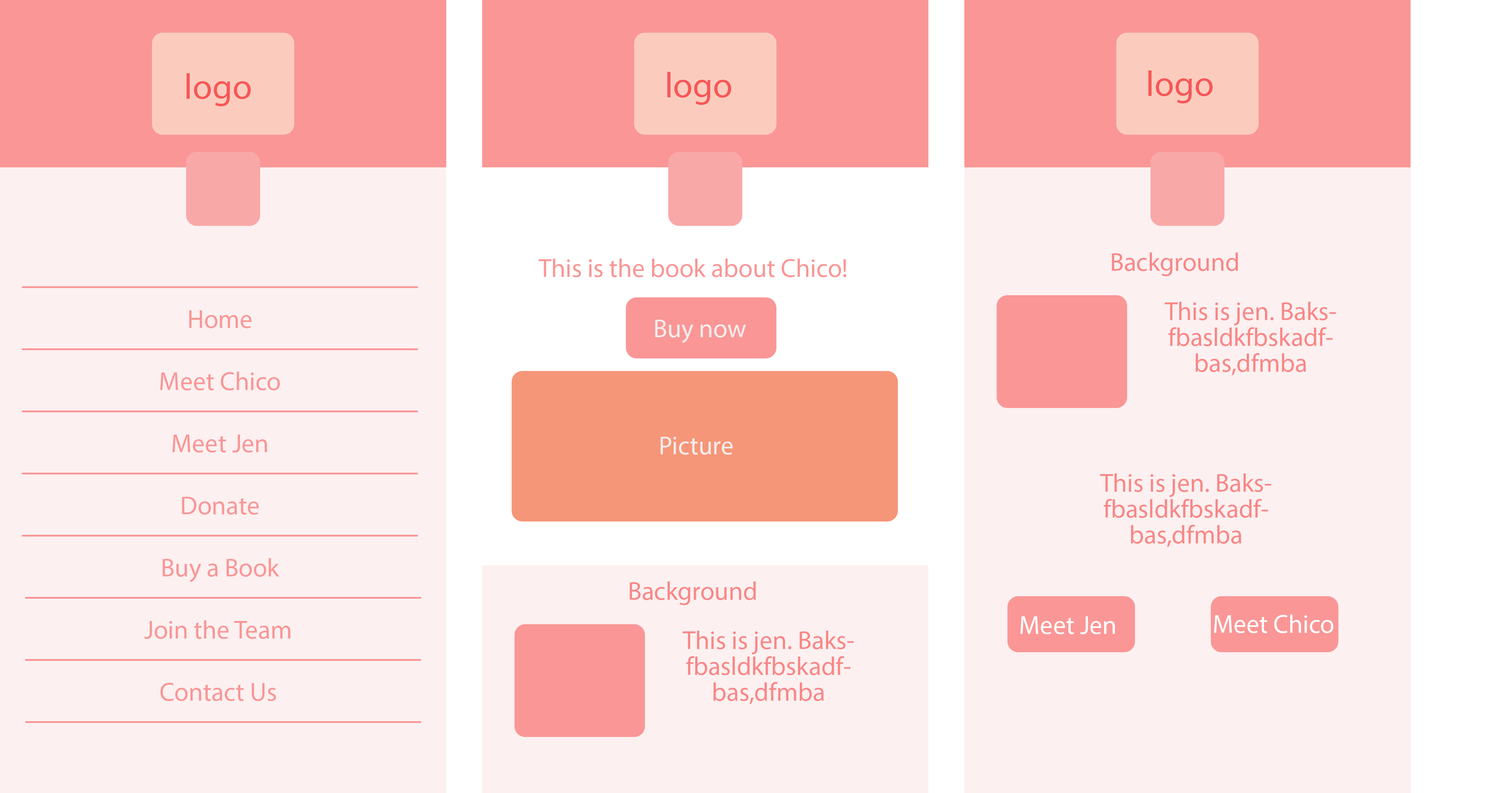
<style>
.page{position:relative;width:1504px;height:793px;background:#fcf0f0}
.page>*{position:absolute;margin:0}
.t1{font:35.9px "MyriadPro-Regular";color:#f85656}
.t2{font:25.9px "MyriadPro-Regular";color:#f98787}
.t3{font:25.9px "MyriadPro-Regular";color:#fa9696}
.t4{font:25.9px/25.9px "MyriadPro-Regular";color:#f98787}
.t5{font:25.9px "MyriadPro-Regular";color:#f3eded}
.t6{font:25.9px "MyriadPro-Regular";color:#ffffff}
</style>
<div class="page">
<p class="t1" style="left:186px;top:73px;width:65px;height:33px">logo</p>
<p class="t1" style="left:667px;top:72px;width:64px;height:33px">logo</p>
<p class="t1" style="left:1148px;top:70px;width:64px;height:33px">logo</p>
<p class="t2" style="left:1111px;top:253px;width:127px;height:23px">Background</p>
<p class="t3" style="left:538px;top:259px;width:308px;height:18px">This is the book about Chico!</p>
<p class="t4" style="left:1164px;top:302px;width:171px;height:73px;text-align:center">This is jen. Baksfbasldkfbskadfbas,dfmba</p>
<p class="t3" style="left:189px;top:310px;width:62px;height:18px">Home</p>
<p class="t5" style="left:655px;top:320px;width:91px;height:23px">Buy now</p>
<p class="t3" style="left:160px;top:372px;width:120px;height:18px">Meet Chico</p>
<p class="t3" style="left:172px;top:435px;width:95px;height:18px">Meet Jen</p>
<p class="t5" style="left:660px;top:437px;width:72px;height:18px">Picture</p>
<p class="t4" style="left:1100px;top:473px;width:171px;height:74px;text-align:center">This is jen. Baksfbasldkfbskadfbas,dfmba</p>
<p class="t3" style="left:182px;top:497px;width:77px;height:18px">Donate</p>
<p class="t3" style="left:162px;top:558px;width:117px;height:24px">Buy a Book</p>
<p class="t2" style="left:629px;top:582px;width:127px;height:23px">Background</p>
<p class="t6" style="left:1020px;top:616px;width:95px;height:18px">Meet Jen</p>
<p class="t6" style="left:1214px;top:615px;width:119px;height:18px">Meet Chico</p>
<p class="t3" style="left:144px;top:620px;width:146px;height:19px">Join the Team</p>
<p class="t4" style="left:682px;top:631px;width:171px;height:73px;text-align:center">This is jen. Baksfbasldkfbskadfbas,dfmba</p>
<p class="t3" style="left:160px;top:683px;width:116px;height:18px">Contact Us</p>
</div>
